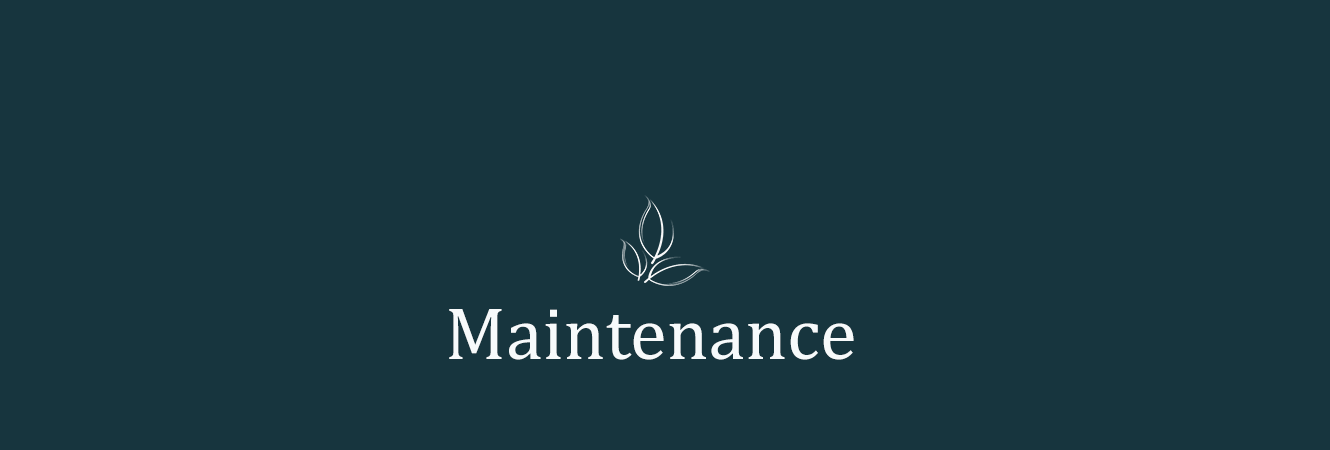
<style>
.page{position:relative;width:1330px;height:450px;background:#17353e}
.page>*{position:absolute;margin:0}
.t1{font:75px "CambriaMath";color:#f7fafb}
</style>
<div class="page">
<p class="t1" style="left:449px;top:309px;width:405px;height:51px">Maintenance</p>
</div>
